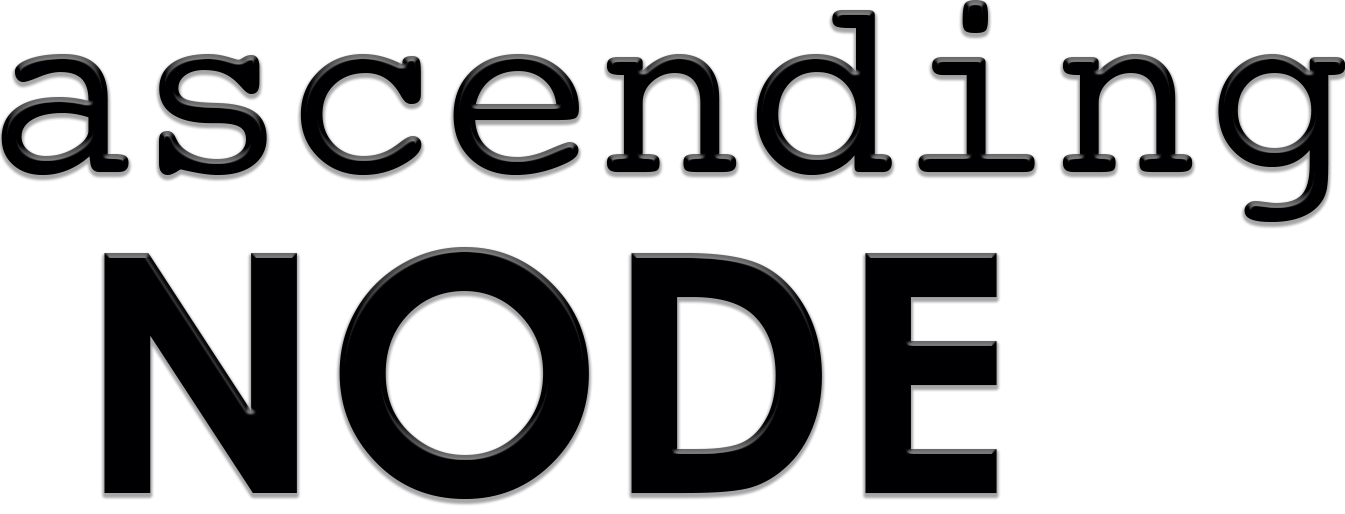
<style>
.page{position:relative;width:1345px;height:514px;background:#ffffff}
.page>*{position:absolute;margin:0}
.t1{font:254.1px "Courier";color:#000002}
.t2{font:334.5px "CenturyGothic-Bold";color:#000002}
</style>
<div class="page">
<p class="t1" style="left:1px;top:0px;width:1345px;height:222px">ascending</p>
<p class="t2" style="left:104px;top:247px;width:893px;height:252px">NODE</p>
</div>
